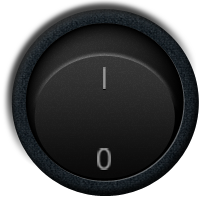
<style>
.page{position:relative;width:207px;height:208px;background:#ffffff}
.page>*{position:absolute;margin:0}
.t1{font:28px "Kartika";color:#999999}
</style>
<div class="page">
<p class="t1" style="left:103px;top:67px;width:3px;height:22px">I</p>
<p class="t1" style="left:97px;top:148px;width:14px;height:22px">0</p>
</div>
